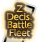
<style>
.page{position:relative;width:38px;height:42px}
.page>*{position:absolute;margin:0}
.t1{font:8px/8px "UDShinGoPro-Light";font-weight:bold}
</style>
<div class="page">
<p class="t1" style="left:7px;top:5px;width:25px;height:32px;text-align:center">Z<br>Decis.<br>Battle<br>Fleet</p>
</div>
